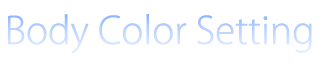
<style>
.page{position:relative;width:320px;height:70px;background:#ffffff}
.page>*{position:absolute;margin:0}
.t1{font:37.4px "KozGoPr6N-Light";color:#c0d6ff}
</style>
<div class="page">
<p class="t1" style="left:8px;top:14px;width:304px;height:40px">Body Color Setting</p>
</div>
